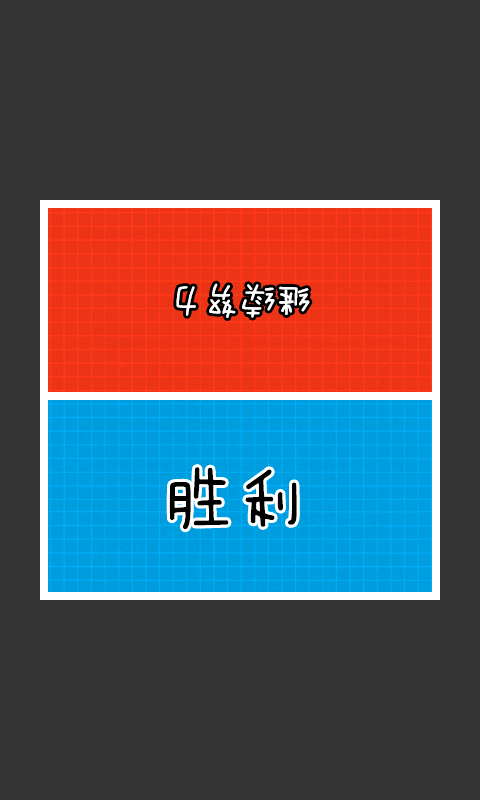
<style>
.page{position:relative;width:480px;height:800px;background:#333333}
.page>*{position:absolute;margin:0}
.t1{font:36px "FZMWJW--GB1-0";color:#ffffff}
.t2{font:72px "FZMWJW--GB1-0";color:#000000}
</style>
<div class="page">
<p class="t1" style="left:176px;top:283px;width:134px;height:35px;rotate:180deg">继续努力</p>
<p class="t2" style="left:169px;top:467px;width:128px;height:63px">胜利</p>
</div>
